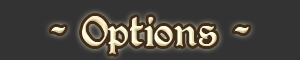
<style>
.page{position:relative;width:300px;height:60px;background:#333333}
.page>*{position:absolute;margin:0}
.t1{font:30px "PerryGothic";color:#fbf1d1}
</style>
<div class="page">
<p class="t1" style="left:51px;top:16px;width:198px;height:38px">- Options -</p>
</div>
